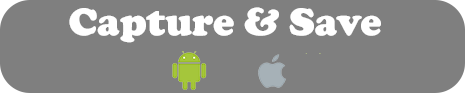
<style>
.page{position:relative;width:465px;height:93px;background:#7f7f7f}
.page>*{position:absolute;margin:0}
.t1{font:40px "CooperBlack";color:#ffffff}
</style>
<div class="page">
<p class="t1" style="left:69px;top:7px;width:312px;height:36px">Capture &amp; Save</p>
</div>
